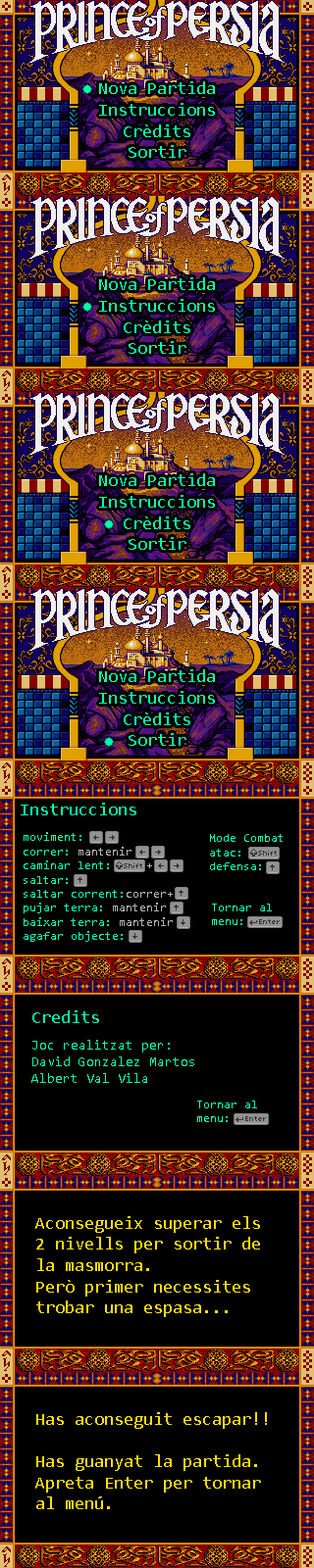
<style>
.page{position:relative;width:314px;height:1568px;background:#000000}
.page>*{position:absolute;margin:0}
.t1{font:17.6px "Consolas";color:#00ffae}
.t2{font:11.8px "Consolas";color:#00ffae}
.t3{font:11.8px "Consolas";color:#b1b1b1}
.t4{font:13.7px "Consolas";color:#00ffae}
</style>
<div class="page">
<p class="t1" style="left:99px;top:81px;width:116px;height:77px;text-align:center">Nova Partida<br>Instruccions<br>Crèdits<br>Sortir</p>
<p class="t1" style="left:99px;top:277px;width:116px;height:77px;text-align:center">Nova Partida<br>Instruccions<br>Crèdits<br>Sortir</p>
<p class="t1" style="left:99px;top:473px;width:116px;height:77px;text-align:center">Nova Partida<br>Instruccions<br>Crèdits<br>Sortir</p>
<p class="t1" style="left:99px;top:669px;width:116px;height:77px;text-align:center">Nova Partida<br>Instruccions<br>Crèdits<br>Sortir</p>
<p class="t1" style="left:21px;top:803px;width:115px;height:12px">Instruccions</p>
<p class="t2" style="left:24px;top:832px;width:148px;height:110px">moviment: <br>correr: <span class="t3">mantenir<br></span>caminar lent:     <span class="t3">+<br></span>saltar:<br>saltar corrent:<span class="t3">correr+ <br></span>pujar terra: <span class="t3">mantenir<br></span>baixar terra: <span class="t3">mantenir<br></span>agafar objecte:</p>
<p class="t2" style="left:210px;top:834px;width:72px;height:36px">Mode Combat<br>atac:<br>defensa:</p>
<p class="t2" style="left:212px;top:904px;width:59px;height:21px">Tornar al<br>menu:</p>
<p class="t1" style="left:32px;top:1010px;width:67px;height:13px">Credits</p>
<p class="t4" style="left:31px;top:1040px;width:163px;height:43px">Joc realitzat per:<br>David Gonzalez Martos<br>Albert Val Vila</p>
<p class="t2" style="left:197px;top:1101px;width:60px;height:21px">Tornar al<br>menu:</p>
</div>
